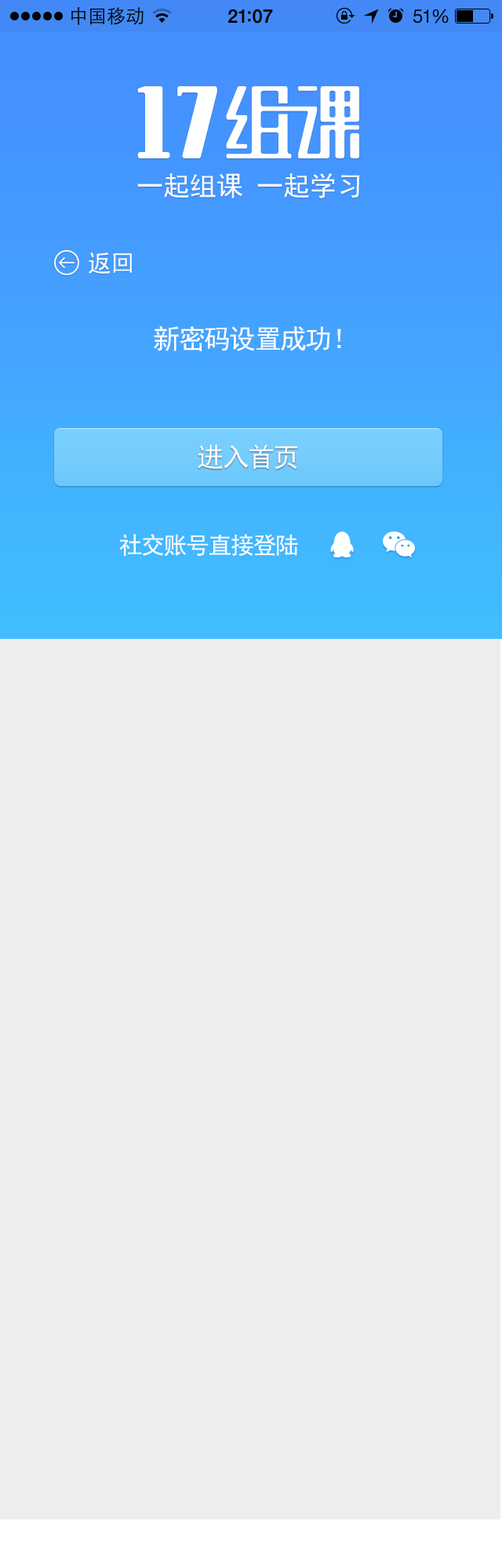
<style>
.page{position:relative;width:502px;height:1568px;background:#ededed}
.page>*{position:absolute;margin:0}
.t1{font:26.7px "SimHei";color:#fbfbfb}
.t2{font:23.5px "SimHei";color:#fefefe}
.t3{font:26.7px "SimHei";letter-spacing:-0.05em;color:#fefefe}
.t4{font:23.5px "SimHei";letter-spacing:-0.05em;color:#fefefe}
</style>
<div class="page">
<p class="t1" style="left:137px;top:172px;width:223px;height:26px">一起组课 一起学习</p>
<p class="t2" style="left:89px;top:252px;width:43px;height:22px">返回</p>
<p class="t3" style="left:154px;top:326px;width:187px;height:25px">新密码设置成功！</p>
<p class="t3" style="left:198px;top:445px;width:100px;height:25px">进入首页</p>
<p class="t4" style="left:119px;top:534px;width:179px;height:23px">社交账号直接登陆</p>
</div>
